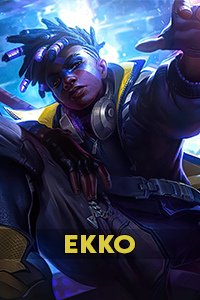
<style>
.page{position:relative;width:200px;height:300px}
.page>*{position:absolute;margin:0}
.t1{font:21.8px "LEMONMILK-Bold";letter-spacing:0.02em;color:#dbcb3c;scale:1.09 1}
</style>
<div class="page">
<p class="t1" style="left:65px;top:235px;width:70px;height:19px">EKKO</p>
</div>
